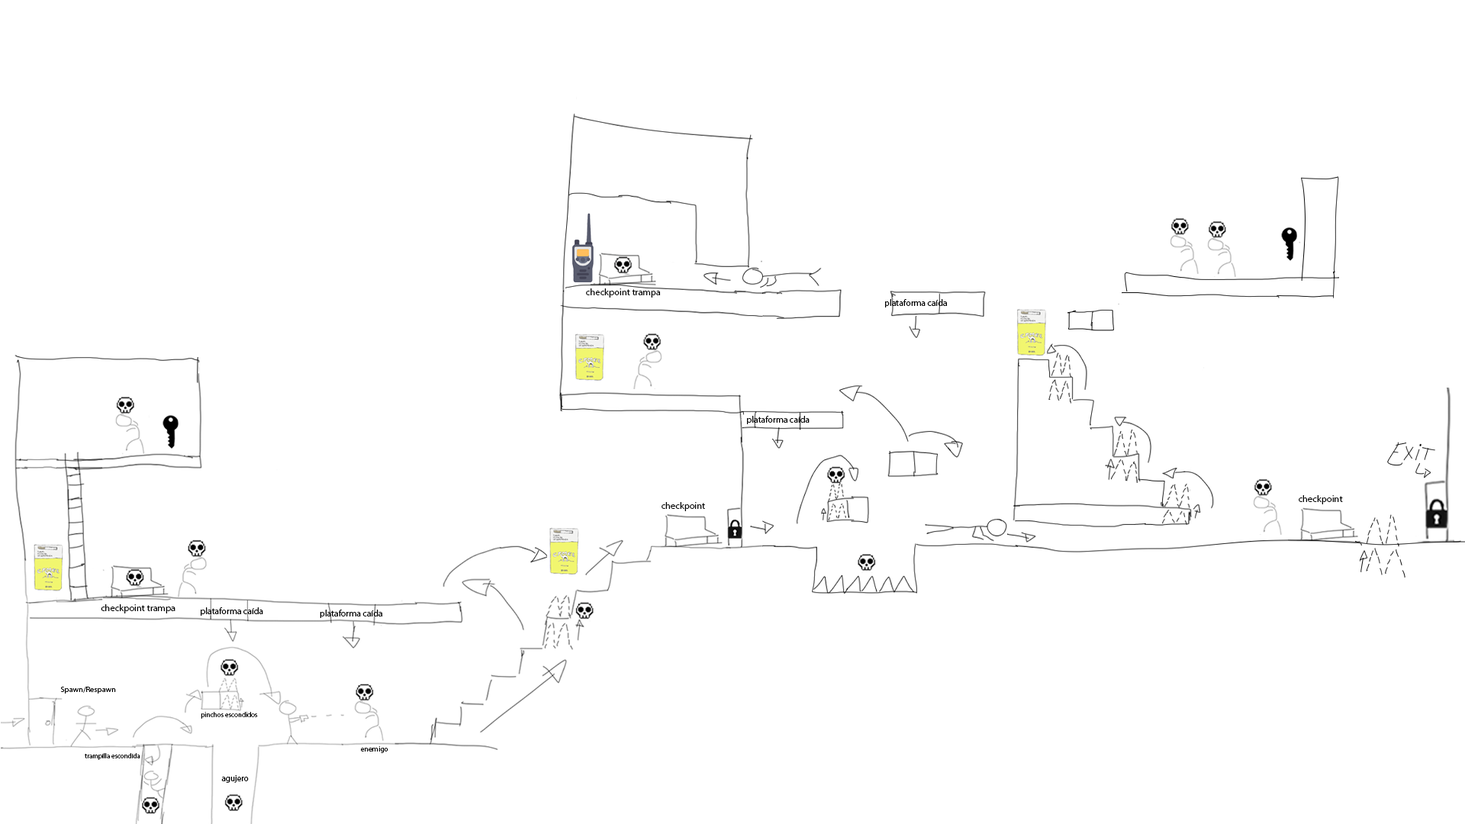
<style>
.page{position:relative;width:1465px;height:824px;background:#ffffff}
.page>*{position:absolute;margin:0}
.t1{font:9.5px "MyriadPro-Regular";color:#000000}
.t2{font:9px "MyriadPro-Regular";color:#000000}
.t3{font:7.9px "MyriadPro-Regular";color:#000000}
.t4{font:6.9px "MyriadPro-Regular";color:#000000}
.t5{font:7.3px "MyriadPro-Regular";color:#000000}
.t6{font:6.7px "MyriadPro-Regular";color:#000000}
.t7{font:8.4px "MyriadPro-Regular";color:#000000}
</style>
<div class="page">
<p class="t1" style="left:586px;top:288px;width:74px;height:10px">checkpoint trampa</p>
<p class="t2" style="left:885px;top:299px;width:63px;height:9px">plataforma caída</p>
<p class="t2" style="left:747px;top:416px;width:63px;height:8px">plataforma caída</p>
<p class="t1" style="left:1299px;top:495px;width:44px;height:9px">checkpoint</p>
<p class="t1" style="left:662px;top:502px;width:43px;height:9px">checkpoint</p>
<p class="t1" style="left:101px;top:604px;width:75px;height:10px">checkpoint trampa</p>
<p class="t2" style="left:201px;top:607px;width:62px;height:9px">plataforma caída</p>
<p class="t2" style="left:320px;top:610px;width:63px;height:8px">plataforma caída</p>
<p class="t3" style="left:60px;top:687px;width:56px;height:7px">Spawn/Respawn</p>
<p class="t4" style="left:201px;top:712px;width:57px;height:7px">pinchos escondidos</p>
<p class="t5" style="left:361px;top:746px;width:27px;height:7px">enemigo</p>
<p class="t6" style="left:85px;top:753px;width:55px;height:7px">trampilla escondida</p>
<p class="t7" style="left:221px;top:775px;width:28px;height:8px">agujero</p>
</div>
